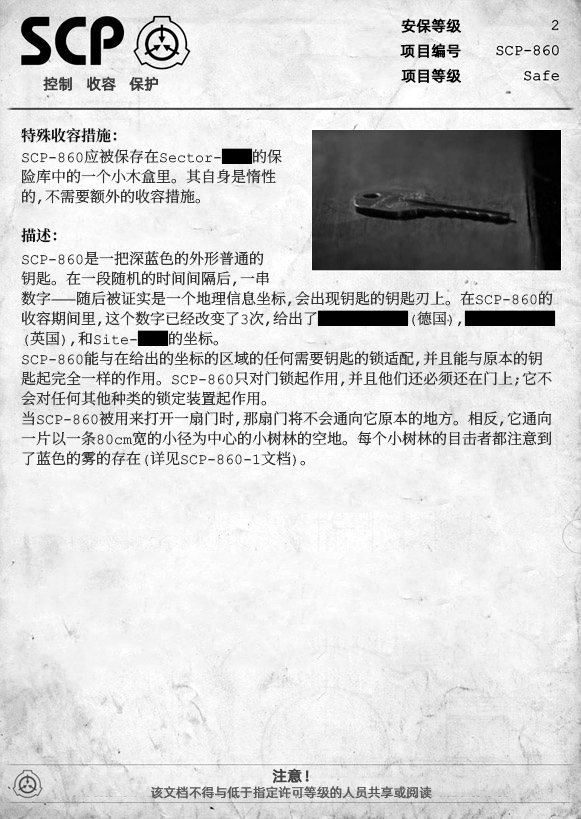
<style>
.page{position:relative;width:581px;height:819px}
.page>*{position:absolute;margin:0}
.t1{font:15px "AlibabaPuHuiTiR";color:#000000;font-weight:bold}
.t2{font:15px "AlibabaPuHuiTiR";color:#3d3d3d;font-weight:bold}
.t3{font:15px "ContainmentBreach-Bold";color:#121212}
.t4{font:15px/20px "ContainmentBreach-Regular";color:#353535}
.t5{font:15px/20px "ContainmentBreach-Regular";color:#000000}
.t6{font:15px "AlibabaPuHuiTiR";color:#414141;font-weight:bold}
.t7{font:13px "AlibabaPuHuiTiR";color:#575757}
</style>
<div class="page">
<p class="t1" style="left:401px;top:18px;width:61px;height:15px">安保等级</p>
<p class="t1" style="left:400px;top:43px;width:61px;height:15px">项目编号</p>
<p class="t2" style="left:43px;top:76px;width:115px;height:15px">控制   收容   保护</p>
<p class="t1" style="left:401px;top:68px;width:61px;height:15px">项目等级</p>
<p class="t3" style="left:21px;top:128px;width:96px;height:15px">特殊收容措施：</p>
<p class="t4" style="left:22px;top:148px;width:260px;height:57px">SCP-860应被保存在Sector-<span class="t5">██</span>的保<br>险库中的一个小木盒里。其自身是惰性<br>的，不需要额外的收容措施。</p>
<p class="t3" style="left:21px;top:228px;width:36px;height:15px">描述：</p>
<p class="t4" style="left:21px;top:251px;width:535px;height:215px">SCP-860是一把深蓝色的外形普通的<br>钥匙。在一段随机的时间间隔后，一串<br>数字——随后被证实是一个地理信息坐标，会出现钥匙的钥匙刃上。在SCP-860的<br>收容期间里，这个数字已经改变了3次，给出了<span class="t5">██████</span>（德国），<span class="t5">██████<br></span>（英国），和Site-<span class="t5">██</span>的坐标。<br>SCP-860能与在给出的坐标的区域的任何需要钥匙的锁适配，并且能与原本的钥<br>匙起完全一样的作用。SCP-860只对门锁起作用，并且他们还必须还在门上；它不<br>会对任何其他种类的锁定装置起作用。<br>当SCP-860被用来打开一扇门时，那扇门将不会通向它原本的地方。相反，它通向<br>一片以一条80cm宽的小径为中心的小树林的空地。每个小树林的目击者都注意到<br>了蓝色的雾的存在（详见SCP-860-1文档）。</p>
<p class="t6" style="left:272px;top:768px;width:37px;height:15px">注意！</p>
<p class="t7" style="left:151px;top:786px;width:281px;height:13px">该文档不得与低于指定许可等级的人员共享或阅读</p>
</div>
